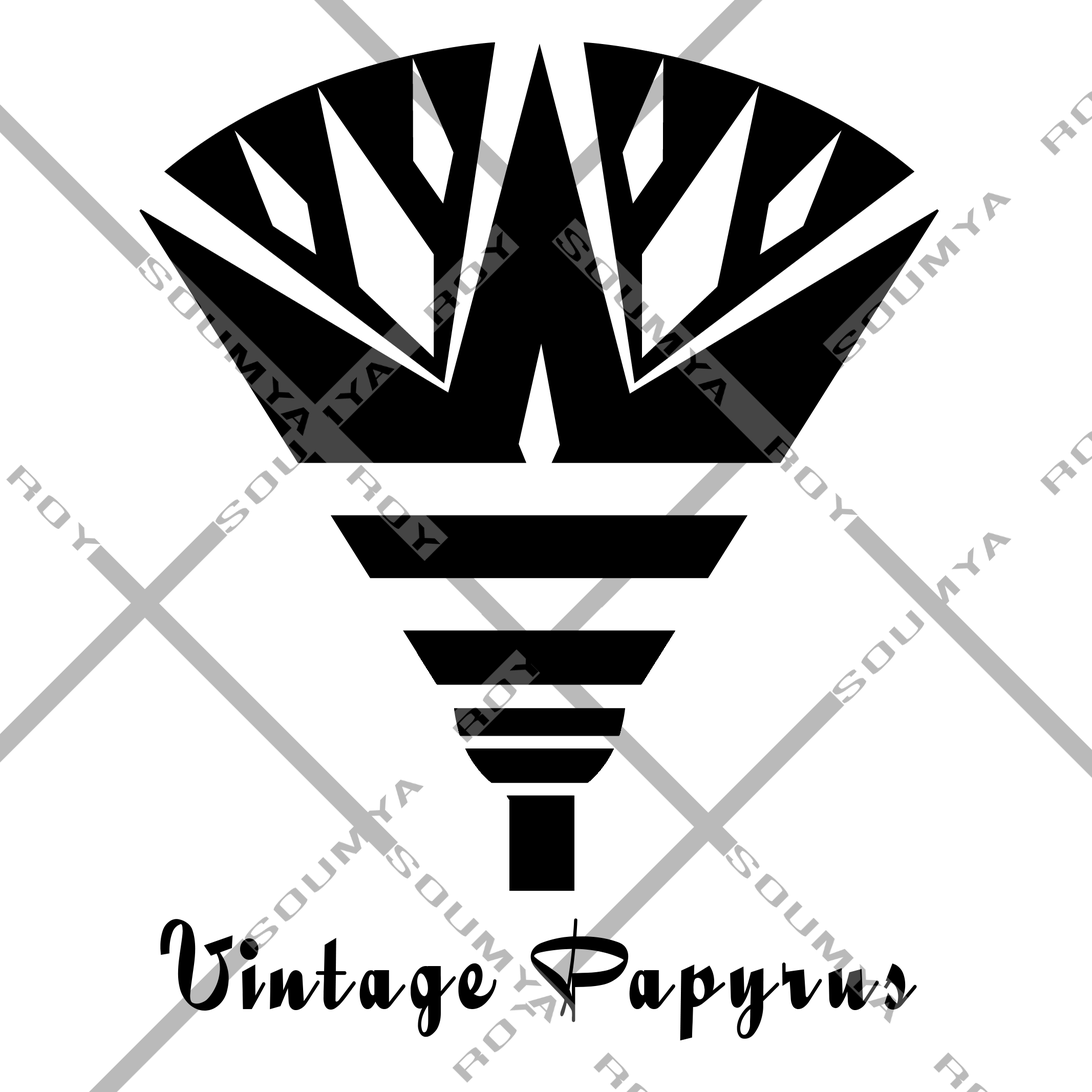
<style>
.page{position:relative;width:1092px;height:1092px;background:#ffffff}
.page>*{position:absolute;margin:0}
.t1{font:132.3px "QuigleyWiggly";letter-spacing:0.075em;color:#000000;scale:0.87 1}
</style>
<div class="page">
<p class="t1" style="left:160px;top:918px;width:757px;height:123px">Vintage Papyrus</p>
</div>
